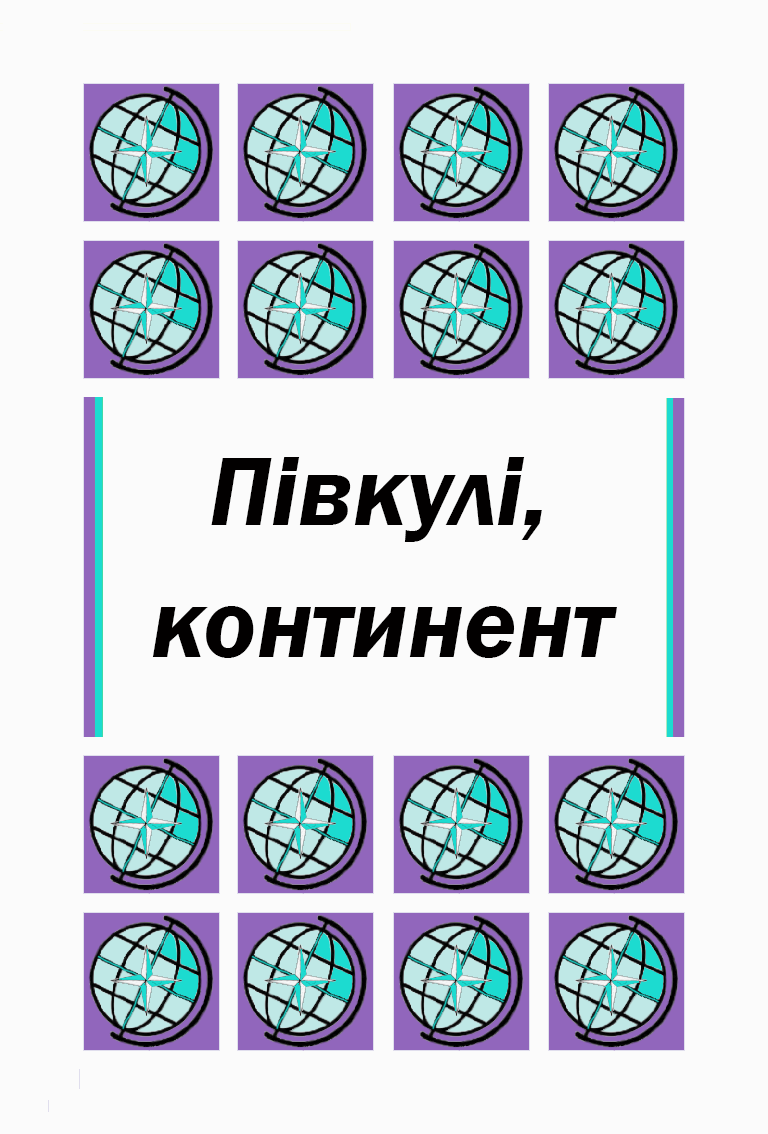
<style>
.page{position:relative;width:768px;height:1134px;background:#fbfbfb}
.page>*{position:absolute;margin:0}
.t1{font:100px "FranklinGothic-DemiItalic";color:#020000}
</style>
<div class="page">
<p class="t1" style="left:211px;top:457px;width:331px;height:85px">Півкулі,</p>
<p class="t1" style="left:152px;top:606px;width:465px;height:52px">континент</p>
</div>
